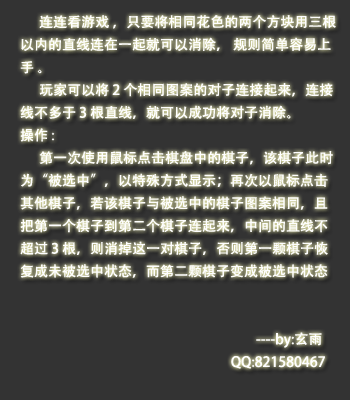
<style>
.page{position:relative;width:350px;height:400px;background:#333333}
.page>*{position:absolute;margin:0}
.t1{font:14px/20px "AdobeHeitiStd-Regular";color:#fefefe}
</style>
<div class="page">
<p class="t1" style="left:20px;top:15px;width:316px;height:354px">连连看游戏 ，只要将相同花色的两个方块用三根<br>以内的直线连在一起就可以消除， 规则简单容易上<br>手 。<br> 玩家可以将 2 个相同图案的对子连接起来，连接<br>线不多于 3 根直线，就可以成功将对子消除。 <br>操作 : <br> 第一次使用鼠标点击棋盘中的棋子，该棋子此时<br>为“被选中”，以特殊方式显示；再次以鼠标点击<br>其他棋子，若该棋子与被选中的棋子图案相同，且<br>把第一个棋子到第二个棋子连起来，中间的直线不<br>超过 3 根，则消掉这一对棋子，否则第一颗棋子恢<br>复成未被选中状态，而第二颗棋子变成被选中状态<br><br><br>                   ----by:玄雨<br>           QQ:821580467</p>
</div>
